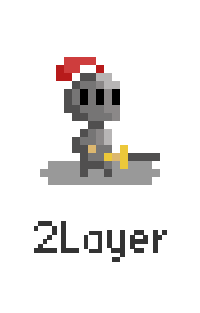
<style>
.page{position:relative;width:200px;height:313px;background:#ffffff}
.page>*{position:absolute;margin:0}
.t1{font:36px "iFlash705";color:#333333}
</style>
<div class="page">
<p class="t1" style="left:34px;top:221px;width:133px;height:41px">2Layer</p>
</div>
